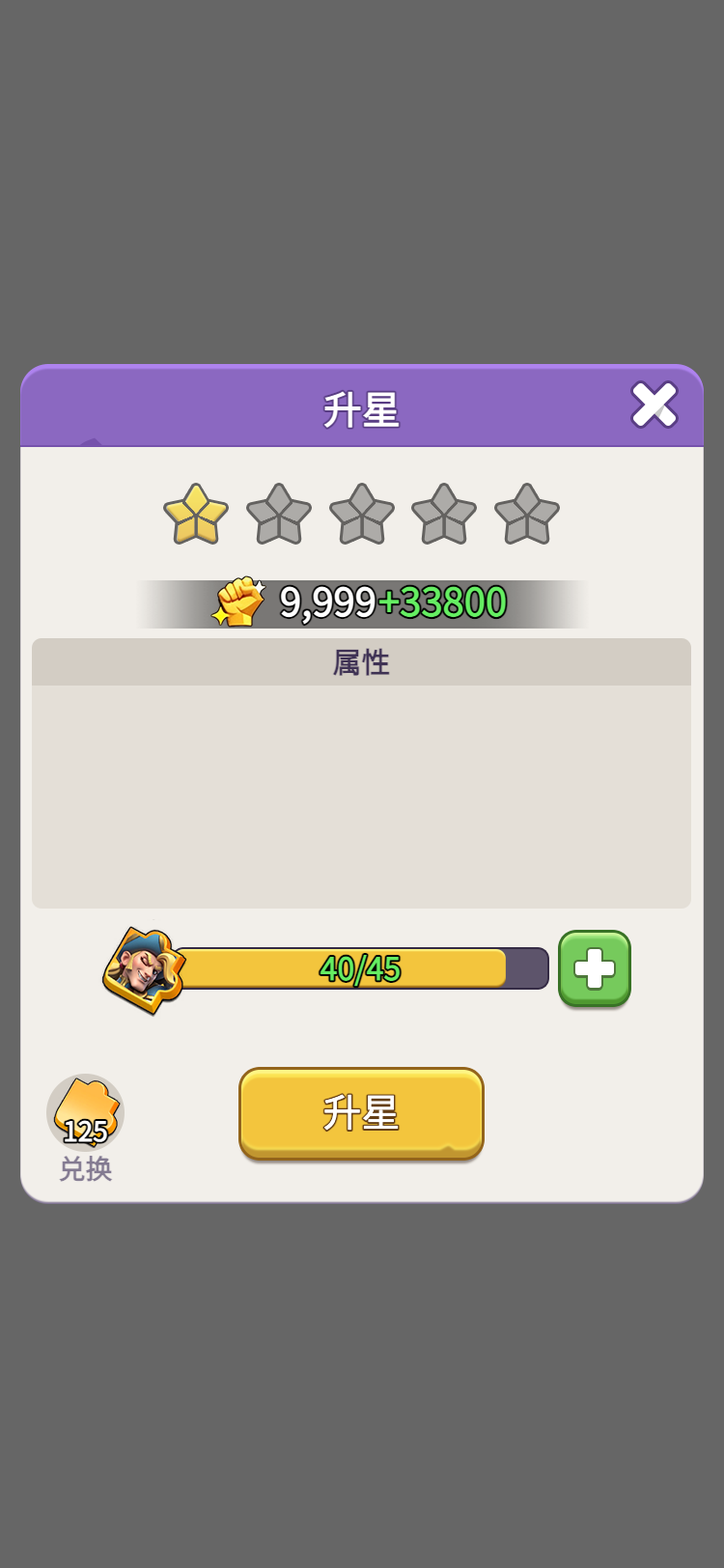
<style>
.page{position:relative;width:724px;height:1568px;background:#666666}
.page>*{position:absolute;margin:0}
.t1{font:38.6px "WebPSD-18463539-0-Regular";color:#ffffff;font-weight:bold}
.t2{font:38.6px "WebPSD-18463539-0-Regular";color:#65ee62;font-weight:bold}
.t3{font:29px "WebPSD-18463539-0-Regular";color:#3f3254;font-weight:bold}
.t4{font:27px "WebPSD-18463539-0-Regular";color:#ffffff;font-weight:bold}
.t5{font:27px "WebPSD-18463539-0-Regular";color:#837a91;font-weight:bold}
</style>
<div class="page">
<p class="t1" style="left:107px;top:381px;width:510px;height:56px">升星</p>
<p class="t1" style="left:272px;top:575px;width:106px;height:54px">9,999</p>
<p class="t2" style="left:377px;top:575px;width:141px;height:54px">+33800</p>
<p class="t3" style="left:32px;top:638px;width:659px;height:48px">属性</p>
<p class="t4" style="left:46px;top:1116px;width:79px;height:31px">125</p>
<p class="t5" style="left:46px;top:1154px;width:79px;height:31px">兑换</p>
</div>
